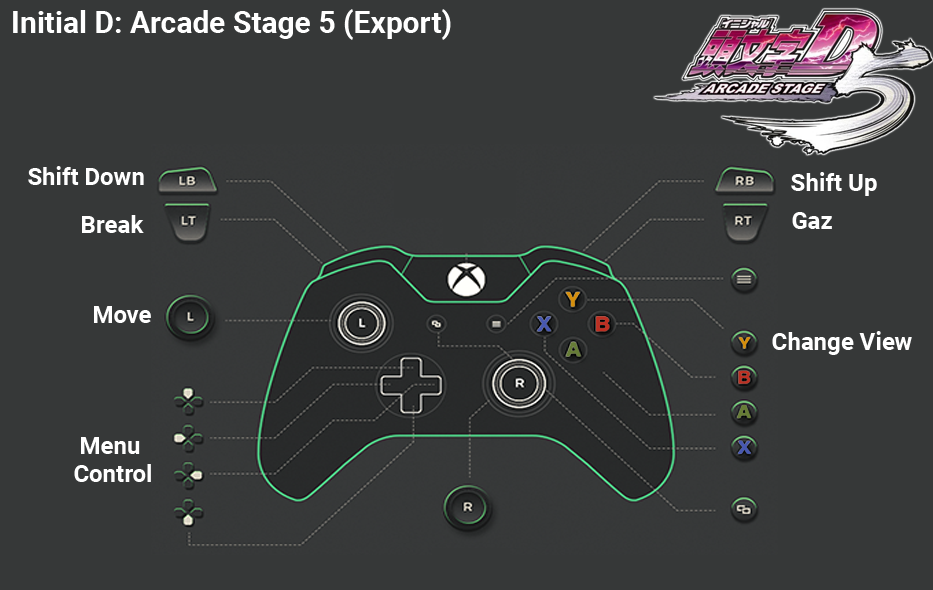
<style>
.page{position:relative;width:933px;height:590px;background:#363838}
.page>*{position:absolute;margin:0}
.t1{font:30px "Roboto-Bold";color:#ffffff}
.t2{font:24px "Roboto-Bold";color:#ffffff}
.t3{font:24px/28px "Roboto-Bold";color:#ffffff}
</style>
<div class="page">
<p class="t1" style="left:13px;top:9px;width:438px;height:31px">Initial D: Arcade Stage 5 (Export)</p>
<p class="t2" style="left:28px;top:166px;width:116px;height:19px">Shift Down</p>
<p class="t2" style="left:791px;top:172px;width:86px;height:24px">Shift Up</p>
<p class="t2" style="left:82px;top:215px;width:62px;height:18px">Break</p>
<p class="t2" style="left:792px;top:212px;width:40px;height:17px">Gaz</p>
<p class="t2" style="left:94px;top:306px;width:57px;height:17px">Move</p>
<p class="t2" style="left:772px;top:331px;width:140px;height:24px">Change View</p>
<p class="t3" style="left:74px;top:437px;width:77px;height:45px;text-align:center">Menu <br>Control</p>
</div>
